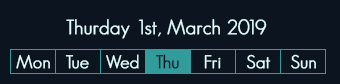
<style>
.page{position:relative;width:340px;height:84px;background:#0c141f}
.page>*{position:absolute;margin:0}
.t1{font:20px "GeosansLight";color:#e3ffff;font-weight:bold}
.t2{font:18px "GeosansLight";color:#e3ffff;font-weight:bold}
.t3{font:18px "GeosansLight";color:#0c141f;font-weight:bold}
</style>
<div class="page">
<p class="t1" style="left:66px;top:19px;width:201px;height:20px">Thurday 1st, March 2019</p>
<p class="t2" style="left:16px;top:54px;width:34px;height:15px">Mon</p>
<p class="t2" style="left:106px;top:54px;width:33px;height:15px">Wed</p>
<p class="t3" style="left:155px;top:54px;width:24px;height:15px">Thu</p>
<p class="t2" style="left:246px;top:54px;width:25px;height:15px">Sat</p>
<p class="t2" style="left:291px;top:54px;width:25px;height:15px">Sun</p>
<p class="t2" style="left:65px;top:55px;width:24px;height:14px">Tue</p>
<p class="t2" style="left:204px;top:55px;width:17px;height:14px">Fri</p>
</div>
